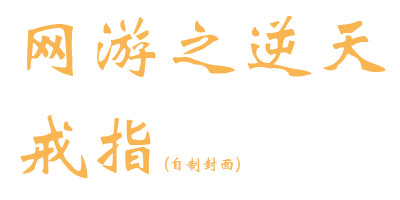
<style>
.page{position:relative;width:400px;height:200px;background:#ffffff}
.page>*{position:absolute;margin:0}
.t1{font:75px/100px "STXinwei";color:#f8b551}
.t2{font:16.7px/100px "STXinwei";color:#f8b551}
</style>
<div class="page">
<p class="t1" style="left:20px;top:16px;width:366px;height:163px">网游之逆天<br>戒指<span class="t2">(自制封面)</span></p>
</div>
